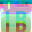
<style>
.page{position:relative;width:32px;height:32px}
.page>*{position:absolute;margin:0}
.t1{font:22px "HelveticaNeue-CondensedBold"}
</style>
<div class="page">
<p class="t1" style="left:6px;top:7px;width:21px;height:16px">LR</p>
</div>
